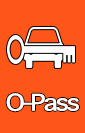
<style>
.page{position:relative;width:85px;height:133px;background:#fe5619}
.page>*{position:absolute;margin:0}
.t1{font:30.6px "AppleSymbols";letter-spacing:-0.08em;color:#ffffff;font-weight:bold;scale:1.18 1}
</style>
<div class="page">
<p class="t1" style="left:6px;top:93px;width:73px;height:19px">O-Pass</p>
</div>
